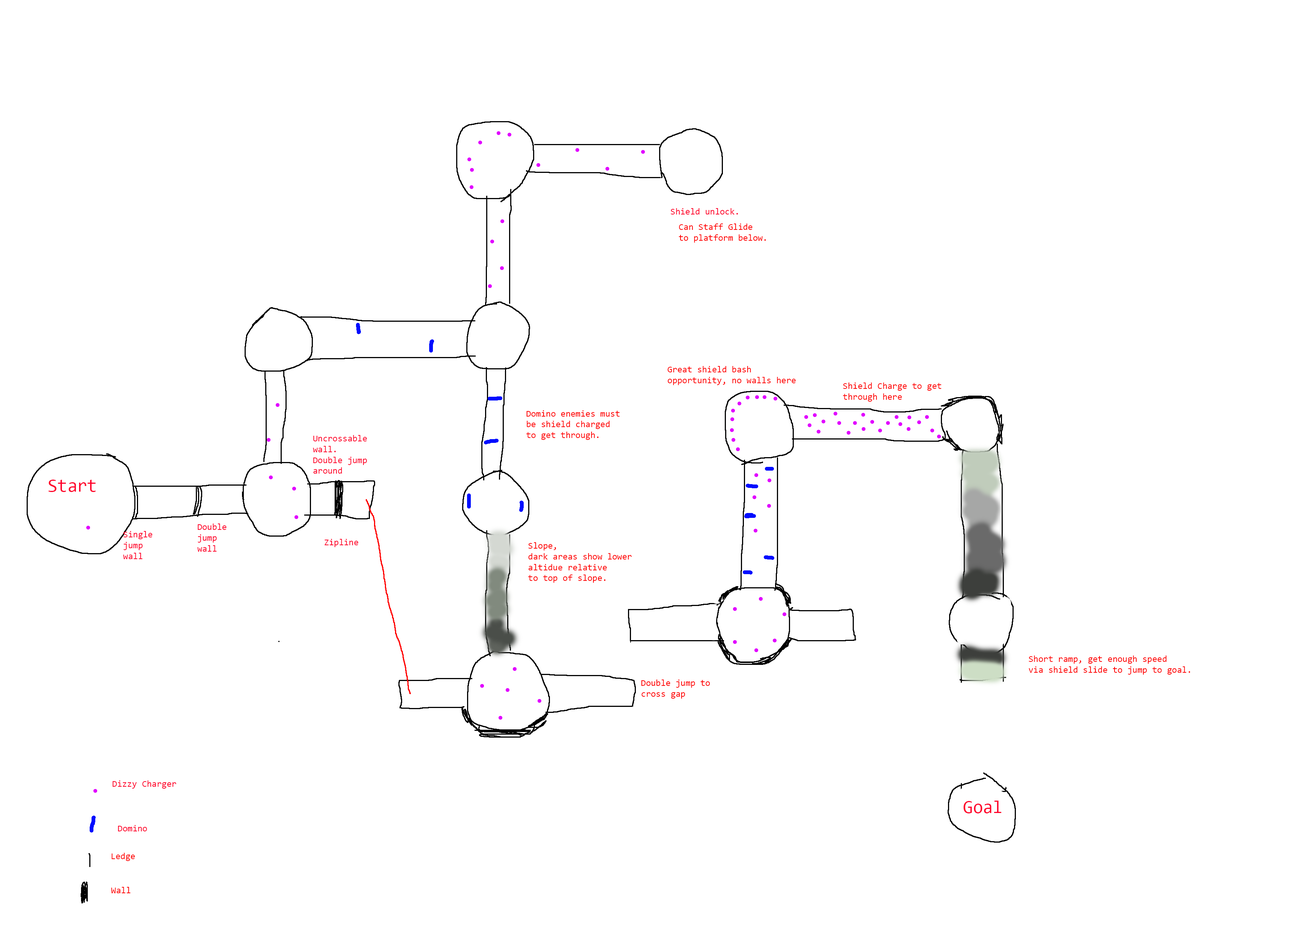
<style>
.page{position:relative;width:1316px;height:930px;background:#ffffff}
.page>*{position:absolute;margin:0}
.t1{font:9px "Consolas";color:#ff002a}
.t2{font:9px "Consolas";color:#ff0000}
.t3{font:18px "Consolas";color:#ff002a}
</style>
<div class="page">
<p class="t1" style="left:670px;top:208px;width:68px;height:6px">Shield unlock.</p>
<p class="t2" style="left:678px;top:224px;width:88px;height:19px">Can Staff Glide<br>to platform below.</p>
<p class="t2" style="left:667px;top:366px;width:128px;height:19px">Great shield bash<br>opportunity, no walls here</p>
<p class="t2" style="left:843px;top:382px;width:98px;height:20px">Shield Charge to get<br>through here</p>
<p class="t2" style="left:526px;top:410px;width:94px;height:30px">Domino enemies must<br>be shield charged<br>to get through.</p>
<p class="t1" style="left:313px;top:435px;width:54px;height:39px">Uncrossable<br>wall.<br>Double jump<br>around</p>
<p class="t3" style="left:48px;top:480px;width:48px;height:12px">Start</p>
<p class="t1" style="left:123px;top:531px;width:29px;height:28px">Single<br>jump<br>wall</p>
<p class="t1" style="left:197px;top:524px;width:29px;height:28px">Double<br>jump<br>wall</p>
<p class="t1" style="left:324px;top:539px;width:34px;height:8px">Zipline</p>
<p class="t2" style="left:528px;top:542px;width:104px;height:41px">Slope,<br>dark areas show lower<br>altidue relative<br>to top of slope.</p>
<p class="t2" style="left:1028px;top:656px;width:162px;height:19px">Short ramp, get enough speed<br>via shield slide to jump to goal.</p>
<p class="t2" style="left:641px;top:680px;width:69px;height:19px">Double jump to<br>cross gap</p>
<p class="t1" style="left:112px;top:780px;width:64px;height:9px">Dizzy Charger</p>
<p class="t3" style="left:963px;top:801px;width:38px;height:12px">Goal</p>
<p class="t1" style="left:118px;top:825px;width:29px;height:6px">Domino</p>
<p class="t2" style="left:111px;top:853px;width:24px;height:8px">Ledge</p>
<p class="t2" style="left:111px;top:887px;width:19px;height:6px">Wall</p>
</div>
